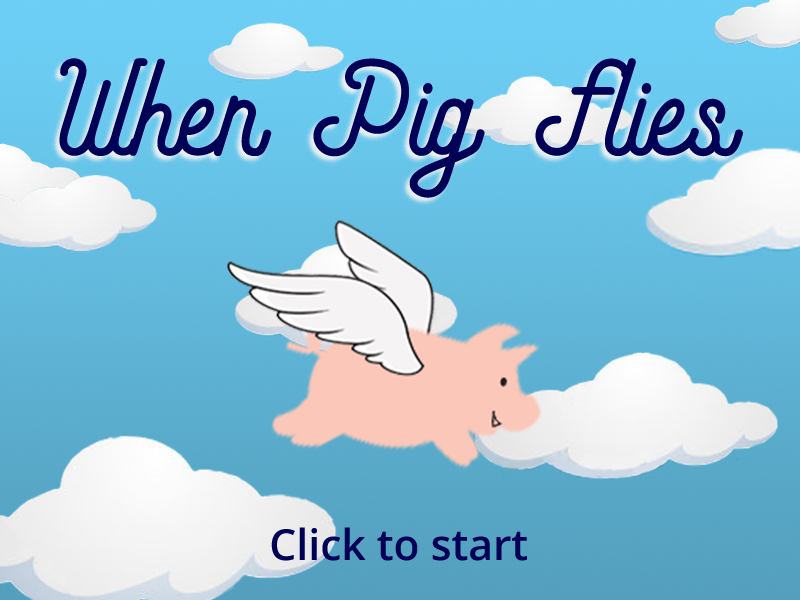
<style>
.page{position:relative;width:800px;height:600px}
.page>*{position:absolute;margin:0}
.t1{font:107.2px "AndaraScript-Soft";color:#000057}
.t2{font:107.2px "AndaraScript-Soft";letter-spacing:0.1em;color:#000057}
.t3{font:42.7px "OpenSans-Semibold";color:#000057}
</style>
<div class="page">
<p class="t1" style="left:59px;top:58px;width:684px;height:140px">When Pig <span class="t2">F</span>lies</p>
<p class="t3" style="left:271px;top:527px;width:256px;height:34px">Click to start</p>
</div>
